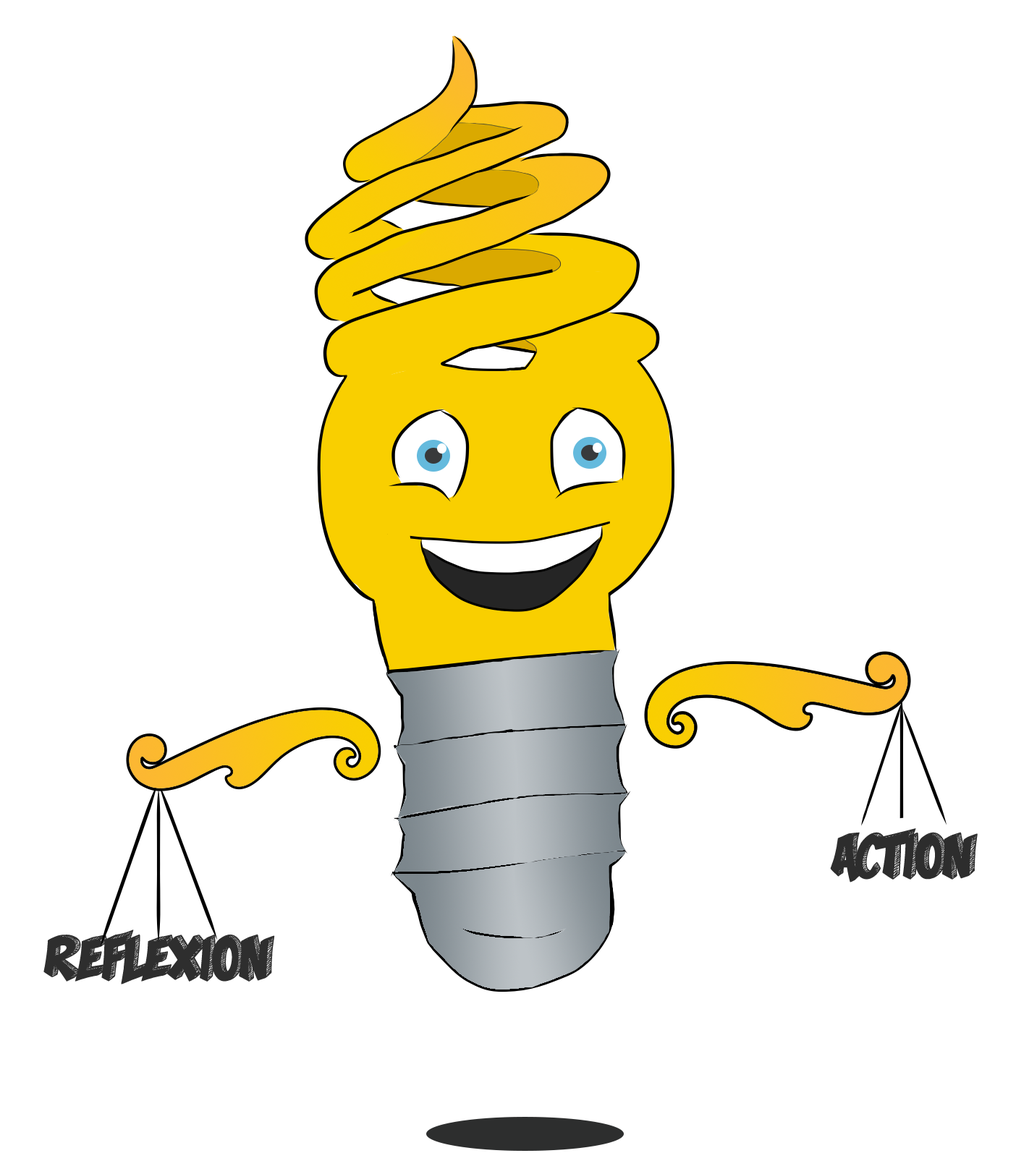
<style>
.page{position:relative;width:1016px;height:1174px;background:#ffffff}
.page>*{position:absolute;margin:0}
.t1{font:55.7px "MonaShark";color:#2d2d2d}
.t2{font:55.7px "MonaShark";color:#2e2e2e}
</style>
<div class="page">
<p class="t1" style="left:830px;top:828px;width:147px;height:55px">Action</p>
<p class="t2" style="left:43px;top:930px;width:232px;height:55px">REflexion</p>
</div>
